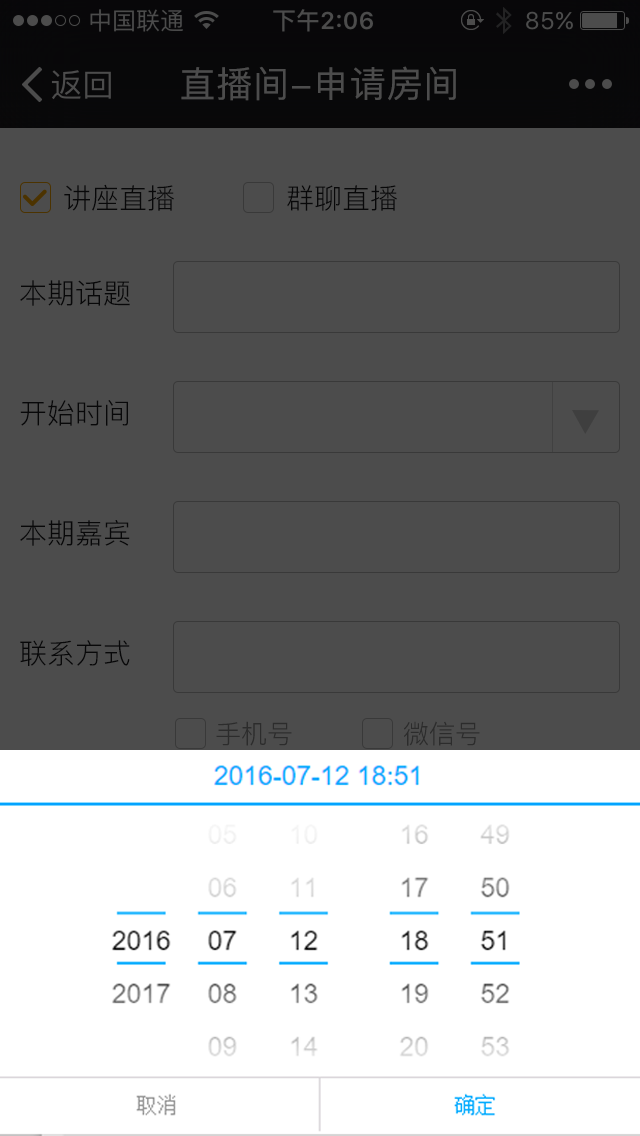
<style>
.page{position:relative;width:640px;height:1136px;background:#4c4c4c}
.page>*{position:absolute;margin:0}
.t1{font:36px "PingFang-SC-Medium";letter-spacing:0.025em;color:#4c4c4c}
.t2{font:28px "PingFang-SC-Regular";color:#1c1b1f}
.t3{font:26px "PingFang-SC-Regular";color:#2c2c2c}
</style>
<div class="page">
<p class="t1" style="left:181px;top:66px;width:275px;height:35px">直播间-申请房间</p>
<p class="t2" style="left:64px;top:184px;width:110px;height:27px">讲座直播</p>
<p class="t2" style="left:287px;top:185px;width:110px;height:26px">群聊直播</p>
<p class="t2" style="left:20px;top:280px;width:110px;height:26px">本期话题</p>
<p class="t2" style="left:20px;top:400px;width:108px;height:26px">开始时间</p>
<p class="t2" style="left:20px;top:520px;width:110px;height:26px">本期嘉宾</p>
<p class="t2" style="left:20px;top:640px;width:110px;height:26px">联系方式</p>
<p class="t3" style="left:216px;top:721px;width:76px;height:25px">手机号</p>
<p class="t3" style="left:404px;top:721px;width:76px;height:25px">微信号</p>
</div>
